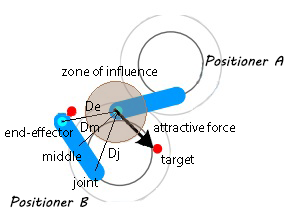
<style>
.page{position:relative;width:298px;height:220px;background:#ffffff}
.page>*{position:absolute;margin:0}
.t1{font:23.3px "MVBoli";color:#000000}
.t2{font:23.3px "MyriadPro-Regular";color:#000000}
</style>
<div class="page">
<p class="t1" style="left:205px;top:54px;width:79px;height:13px">Positioner A</p>
<p class="t2" style="left:62px;top:66px;width:95px;height:10px">zone of influence</p>
<p class="t2" style="left:86px;top:101px;width:14px;height:10px">De</p>
<p class="t2" style="left:81px;top:122px;width:18px;height:10px">Dm</p>
<p class="t2" style="left:154px;top:122px;width:81px;height:10px">attractive force</p>
<p class="t2" style="left:5px;top:127px;width:68px;height:10px">end-effector</p>
<p class="t2" style="left:109px;top:148px;width:10px;height:13px">Dj</p>
<p class="t2" style="left:43px;top:151px;width:38px;height:10px">middle</p>
<p class="t2" style="left:161px;top:155px;width:33px;height:12px">target</p>
<p class="t2" style="left:72px;top:177px;width:26px;height:13px">joint</p>
<p class="t1" style="left:10px;top:195px;width:79px;height:13px">Positioner B</p>
</div>
